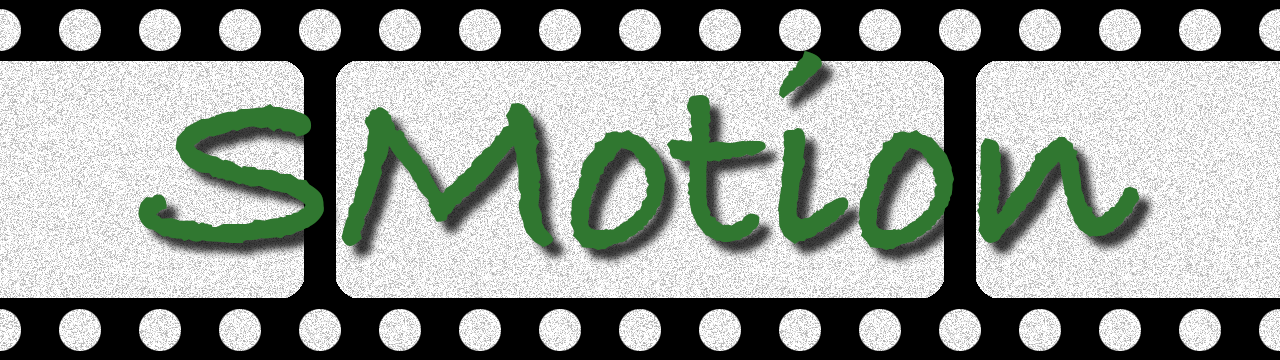
<style>
.page{position:relative;width:1280px;height:360px;background:#ffffff}
.page>*{position:absolute;margin:0}
.t1{font:260px "BradleyHandITCTT-Bold";color:#307730}
</style>
<div class="page">
<p class="t1" style="left:138px;top:51px;width:1002px;height:199px">SMotion</p>
</div>
